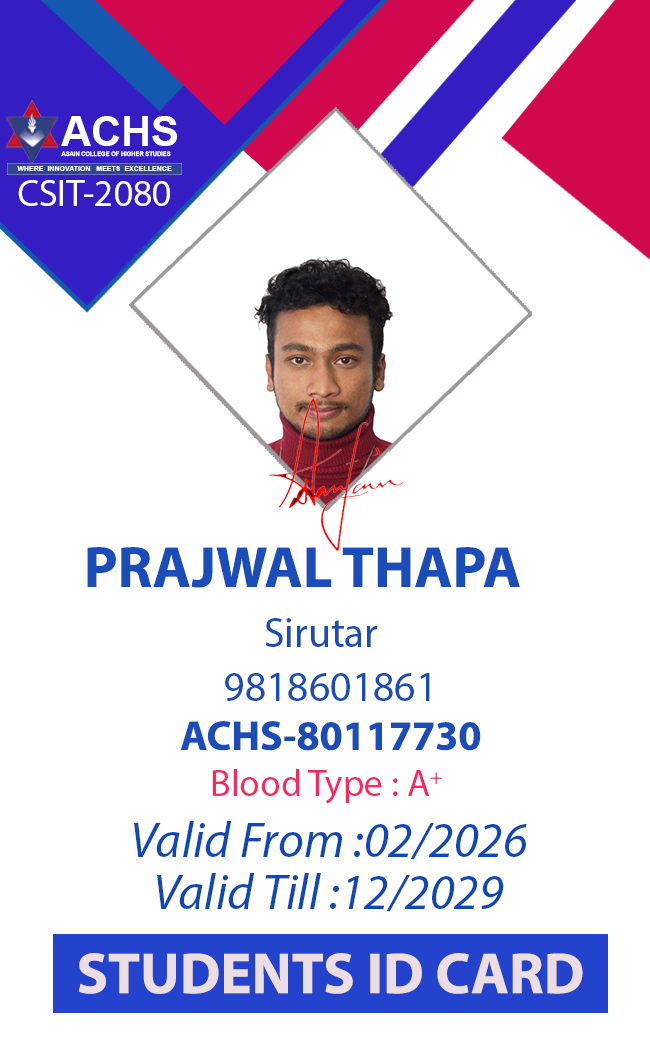
<style>
.page{position:relative;width:650px;height:1039px;background:#ffffff}
.page>*{position:absolute;margin:0}
.t1{font:41.7px "Arial-BoldMT";color:#ffffff}
.t2{font:6.3px "Arial-BoldMT";color:#ffffff;scale:0.94 1}
.t3{font:6.3px "Arial-BoldMT";color:#ffffff;scale:1.11 1}
.t4{font:37.5px "MyriadPro-Regular";color:#fcfafa}
.t5{font:58.3px "MyriadPro-Bold";color:#1a4dba}
.t6{font:41.7px "MyriadPro-Regular";color:#1a4dba}
.t7{font:41.7px "MyriadPro-Bold";color:#1a4dba}
.t8{font:37.5px "MyriadPro-Regular";color:#fa285f}
.t9{font:50px "MyriadPro-It";color:#1148b8}
.t10{font:58.3px "MyriadPro-Bold";color:#ecdde2}
</style>
<div class="page">
<p class="t1" style="left:61px;top:116px;width:116px;height:30px">ACHS</p>
<p class="t2" style="left:61px;top:151px;width:110px;height:6px">ASAIN COLLEGE OF HIGHER STUDIES</p>
<p class="t3" style="left:17px;top:166px;width:155px;height:5px">WHERE  INNOVATION   MEETS  EXCELLENCE</p>
<p class="t4" style="left:18px;top:180px;width:152px;height:26px">CSIT-2080</p>
<p class="t5" style="left:87px;top:547px;width:433px;height:41px">PRAJWAL THAPA</p>
<p class="t6" style="left:265px;top:618px;width:112px;height:29px">Sirutar</p>
<p class="t6" style="left:225px;top:673px;width:205px;height:28px">9818601861</p>
<p class="t7" style="left:180px;top:721px;width:301px;height:30px">ACHS-80117730</p>
<p class="t8" style="left:212px;top:769px;width:230px;height:35px">Blood Type : A+</p>
<p class="t9" style="left:134px;top:821px;width:393px;height:39px">Valid From :02/2026</p>
<p class="t9" style="left:157px;top:873px;width:347px;height:39px">Valid Till :12/2029</p>
<p class="t10" style="left:78px;top:953px;width:505px;height:41px">STUDENTS ID CARD</p>
</div>
